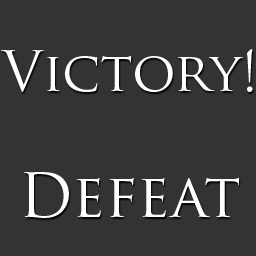
<style>
.page{position:relative;width:256px;height:256px;background:#333333}
.page>*{position:absolute;margin:0}
.t1{font:54px "TrajanPro-Regular";color:#ffffff}
.t2{font:60px "TrajanPro-Regular";color:#fefefe}
</style>
<div class="page">
<p class="t1" style="left:1px;top:49px;width:252px;height:43px">Victory!</p>
<p class="t2" style="left:23px;top:172px;width:216px;height:46px">Defeat</p>
</div>
